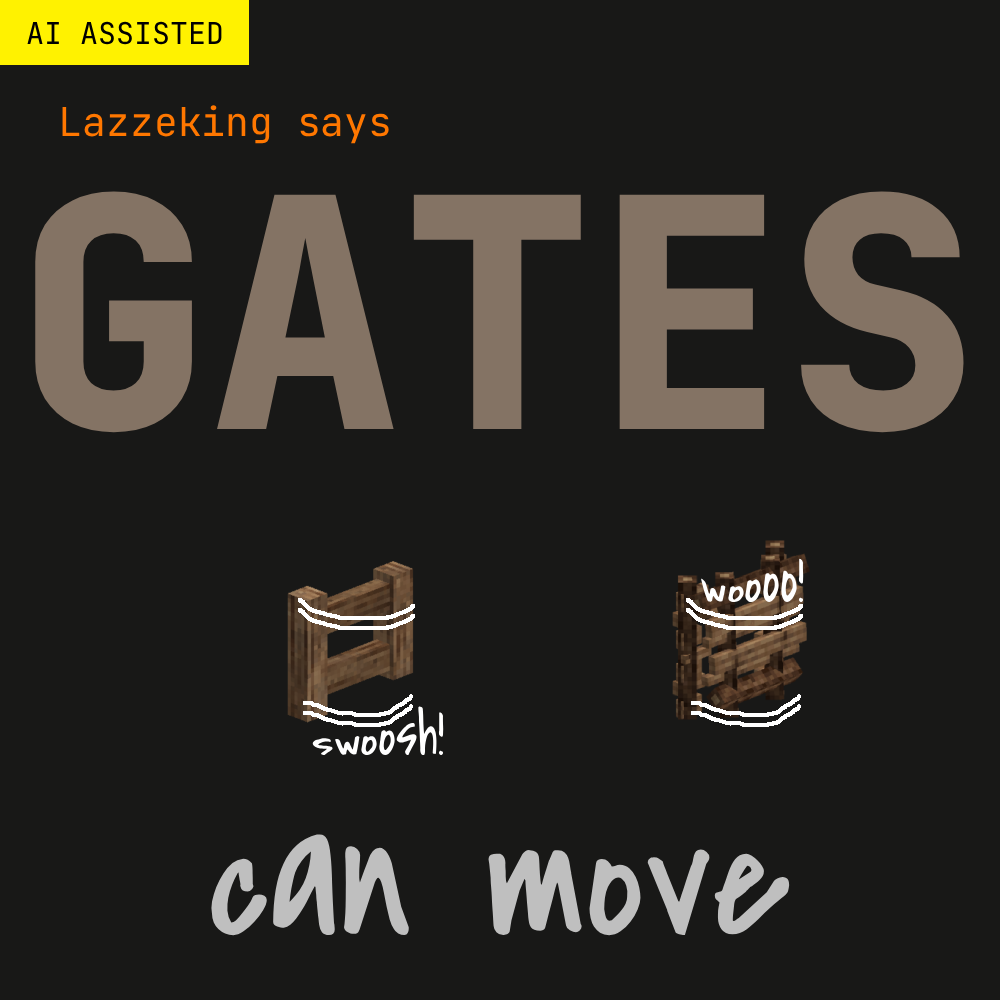
<style>
.page{position:relative;width:1000px;height:1000px;background:#181817}
.page>*{position:absolute;margin:0}
.t1{font:30px "JetBrainsMonoRoman-Regular";color:#000000}
.t2{font:39.7px "JetBrainsMonoRoman-Regular";color:#ff7700}
.t3{font:321px "JetBrainsMonoRoman-ExtraBold";color:#847364}
.t4{font:53.8px "CoveredByYourGrace";color:#ffffff}
.t5{font:179.1px "CoveredByYourGrace";color:#bfbfbf}
</style>
<div class="page">
<p class="t1" style="left:27px;top:21px;width:195px;height:24px">AI ASSISTED</p>
<p class="t2" style="left:62px;top:105px;width:327px;height:39px">Lazzeking says</p>
<p class="t3" style="left:35px;top:191px;width:929px;height:242px">GATES</p>
<p class="t4" style="left:701px;top:558px;width:103px;height:45px">woooo!</p>
<p class="t4" style="left:312px;top:706px;width:132px;height:50px">swoosh!</p>
<p class="t5" style="left:210px;top:834px;width:580px;height:102px">can move</p>
</div>
